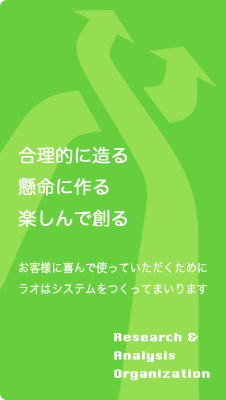
<style>
.page{position:relative;width:226px;height:400px;background:#67ce3d}
.page>*{position:absolute;margin:0}
.t1{font:18px "HiraMaruPro-W4";color:#ffffff;font-weight:bold}
.t2{font:12.1px "HiraKakuPro-W3";color:#ffffff;font-weight:bold;scale:0.9 1}
.t3{font:10.5px "Chicago";color:#ffffff;font-weight:bold;scale:1.27 1}
</style>
<div class="page">
<p class="t1" style="left:18px;top:146px;width:109px;height:81px">合理的に造る<br>懸命に作る<br>楽しんで創る</p>
<p class="t2" style="left:19px;top:261px;width:188px;height:34px">お客様に喜んで使っていただくために<br>ラオはシステムをつくってまいります</p>
<p class="t3" style="left:114px;top:333px;width:96px;height:48px">Research &amp;<br>Analysis<br>Organization</p>
</div>
